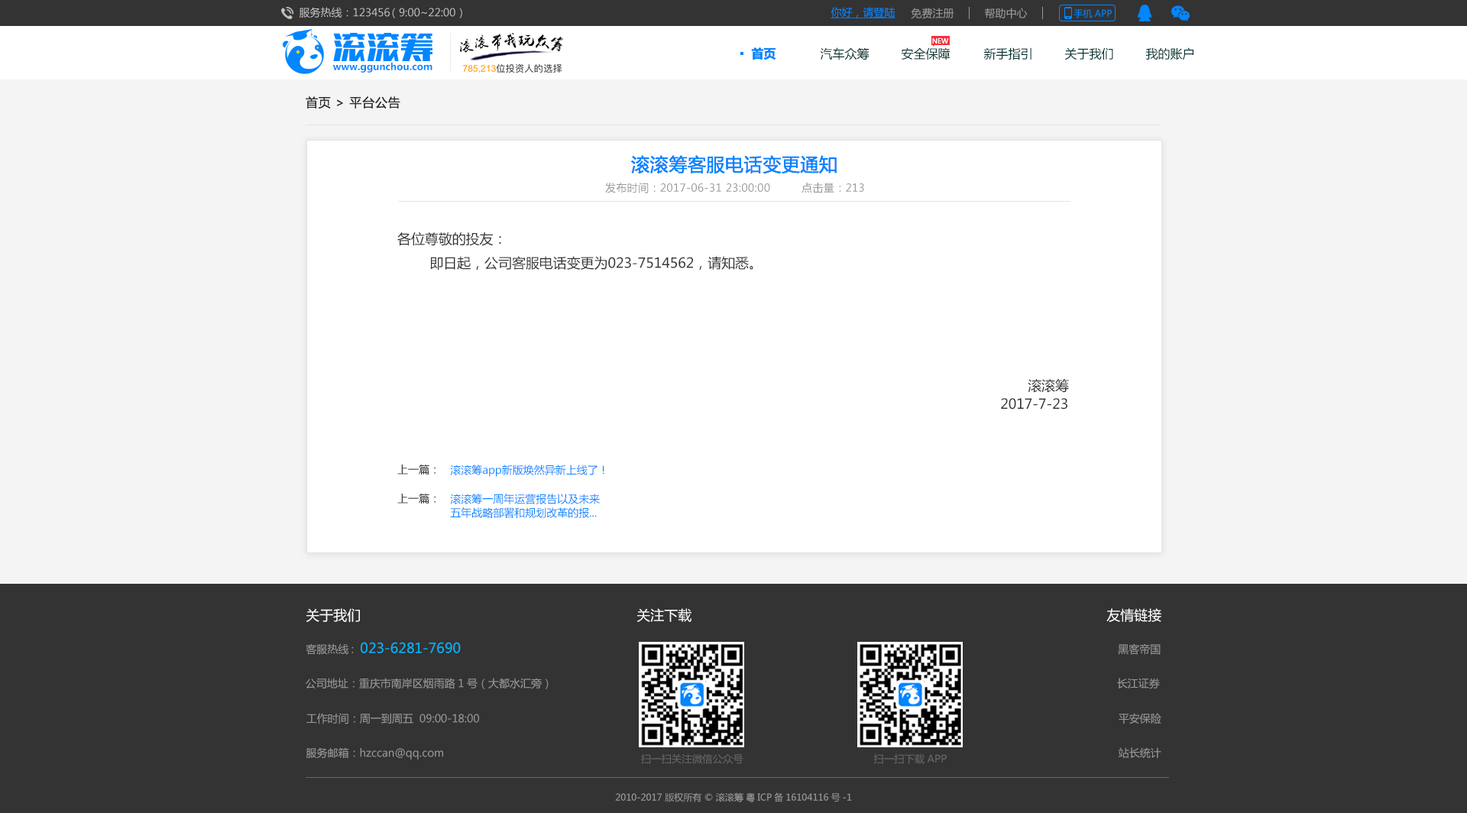
<style>
.page{position:relative;width:1467px;height:813px;background:#ffffff}
.page>*{position:absolute;margin:0}
.t1{font:10.7px "MicrosoftYaHei";color:#c4c4c4}
.t2{font:10.7px "MicrosoftYaHei";color:#0386ff;text-decoration:underline}
.t3{font:10.7px "MicrosoftYaHei";color:#999999}
.t4{font:9.2px "MicrosoftYaHei";color:#0386ff}
.t5{font:6.9px "MicrosoftYaHei";color:#ffffff}
.t6{font:12.2px "MicrosoftYaHei-Bold";color:#0386ff}
.t7{font:12.2px "MicrosoftYaHei";color:#033333}
.t8{font:9.6px "MicrosoftYaHei-Bold";color:#0386ff}
.t9{font:12.2px "MicrosoftYaHei";letter-spacing:0.05em;color:#333333}
.t10{font:18.3px "MicrosoftYaHei";letter-spacing:0.025em;color:#0386ff}
.t11{font:10.7px "MicrosoftYaHei";letter-spacing:0.025em;color:#999999}
.t12{font:13.8px "MicrosoftYaHei";color:#333333}
.t13{font:10.7px "MicrosoftYaHei";color:#333333}
.t14{font:10.7px "MicrosoftYaHei";color:#0386ff}
.t15{font:10.7px/13.8px "MicrosoftYaHei";color:#0386ff}
.t16{font:13.8px "MicrosoftYaHei";color:#fffefe}
.t17{font:13.8px "MicrosoftYaHei";color:#03b6ff}
.t18{font:10.2px "MicrosoftYaHei";color:#666666}
.t19{font:9.2px "MicrosoftYaHei";color:#999999}
</style>
<div class="page">
<p class="t1" style="left:299px;top:7px;width:163px;height:11px">服务热线：123456 （9:00~22:00）</p>
<p class="t2" style="left:830px;top:7px;width:65px;height:11px">你好，请登陆</p>
<p class="t3" style="left:911px;top:8px;width:43px;height:11px">免费注册</p>
<p class="t3" style="left:985px;top:8px;width:43px;height:11px">帮助中心</p>
<p class="t4" style="left:1073px;top:9px;width:39px;height:9px">手机APP</p>
<p class="t5" style="left:932px;top:37px;width:17px;height:7px">NEW</p>
<p class="t6" style="left:751px;top:47px;width:25px;height:13px">首页</p>
<p class="t7" style="left:820px;top:47px;width:49px;height:13px">汽车众筹</p>
<p class="t7" style="left:901px;top:47px;width:49px;height:13px">安全保障</p>
<p class="t7" style="left:983px;top:47px;width:48px;height:13px">新手指引</p>
<p class="t7" style="left:1064px;top:47px;width:49px;height:13px">关于我们</p>
<p class="t7" style="left:1145px;top:47px;width:48px;height:13px">我的账户</p>
<p class="t8" style="left:333px;top:62px;width:99px;height:11px">www.ggunchou.com</p>
<p class="t9" style="left:306px;top:96px;width:94px;height:13px">首页 &gt; 平台公告</p>
<p class="t10" style="left:631px;top:155px;width:206px;height:19px">滚滚筹客服电话变更通知</p>
<p class="t11" style="left:605px;top:183px;width:165px;height:10px">发布时间：2017-06-31 23:00:00</p>
<p class="t11" style="left:801px;top:183px;width:63px;height:10px">点击量：213</p>
<p class="t12" style="left:397px;top:232px;width:356px;height:38px">各位尊敬的投友：<br>        即日起，公司客服电话变更为023-7514562，请知悉。</p>
<p class="t12" style="left:1028px;top:379px;width:41px;height:14px">滚滚筹</p>
<p class="t12" style="left:1001px;top:398px;width:66px;height:12px">2017-7-23</p>
<p class="t13" style="left:397px;top:464px;width:38px;height:11px">上一篇：</p>
<p class="t14" style="left:450px;top:465px;width:154px;height:12px">滚滚筹app新版焕然异新上线了！</p>
<p class="t13" style="left:397px;top:493px;width:38px;height:11px">上一篇：</p>
<p class="t15" style="left:450px;top:494px;width:150px;height:24px">滚滚筹一周年运营报告以及未来<br>五年战略部署和规划改革的报...</p>
<p class="t16" style="left:306px;top:608px;width:54px;height:14px">关于我们</p>
<p class="t16" style="left:636px;top:608px;width:55px;height:14px">关注下载</p>
<p class="t16" style="left:1106px;top:608px;width:55px;height:14px">友情链接</p>
<p class="t17" style="left:306px;top:642px;width:155px;height:13px"><span class="t3">客服热线:  </span>023-6281-7690</p>
<p class="t3" style="left:1118px;top:643px;width:43px;height:12px">黑客帝国</p>
<p class="t3" style="left:306px;top:678px;width:243px;height:11px">公司地址：重庆市南岸区烟雨路1号（大都水汇旁）</p>
<p class="t3" style="left:1117px;top:678px;width:43px;height:11px">长江证券</p>
<p class="t3" style="left:306px;top:713px;width:173px;height:11px">工作时间：周一到周五  09:00-18:00</p>
<p class="t3" style="left:1119px;top:713px;width:42px;height:11px">平安保险</p>
<p class="t3" style="left:306px;top:747px;width:137px;height:12px">服务邮箱：hzccan@qq.com</p>
<p class="t3" style="left:1118px;top:747px;width:43px;height:11px">站长统计</p>
<p class="t18" style="left:641px;top:753px;width:102px;height:11px">扫一扫关注微信公众号</p>
<p class="t18" style="left:873px;top:753px;width:74px;height:11px">扫一扫下载APP</p>
<p class="t19" style="left:615px;top:792px;width:237px;height:10px">2010-2017 版权所有 © 滚滚筹 粤ICP备16104116号-1</p>
</div>
